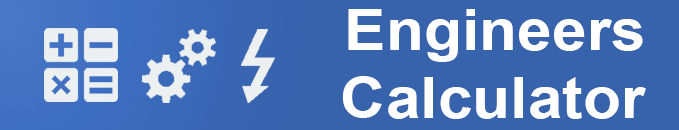
<style>
.page{position:relative;width:679px;height:130px;background:#3762ac}
.page>*{position:absolute;margin:0}
.t1{font:56.7px "Arial-BoldMT";color:#ffffff;scale:1.1 1}
</style>
<div class="page">
<p class="t1" style="left:342px;top:9px;width:304px;height:110px;text-align:right">Engineers<br>Calculator</p>
</div>
